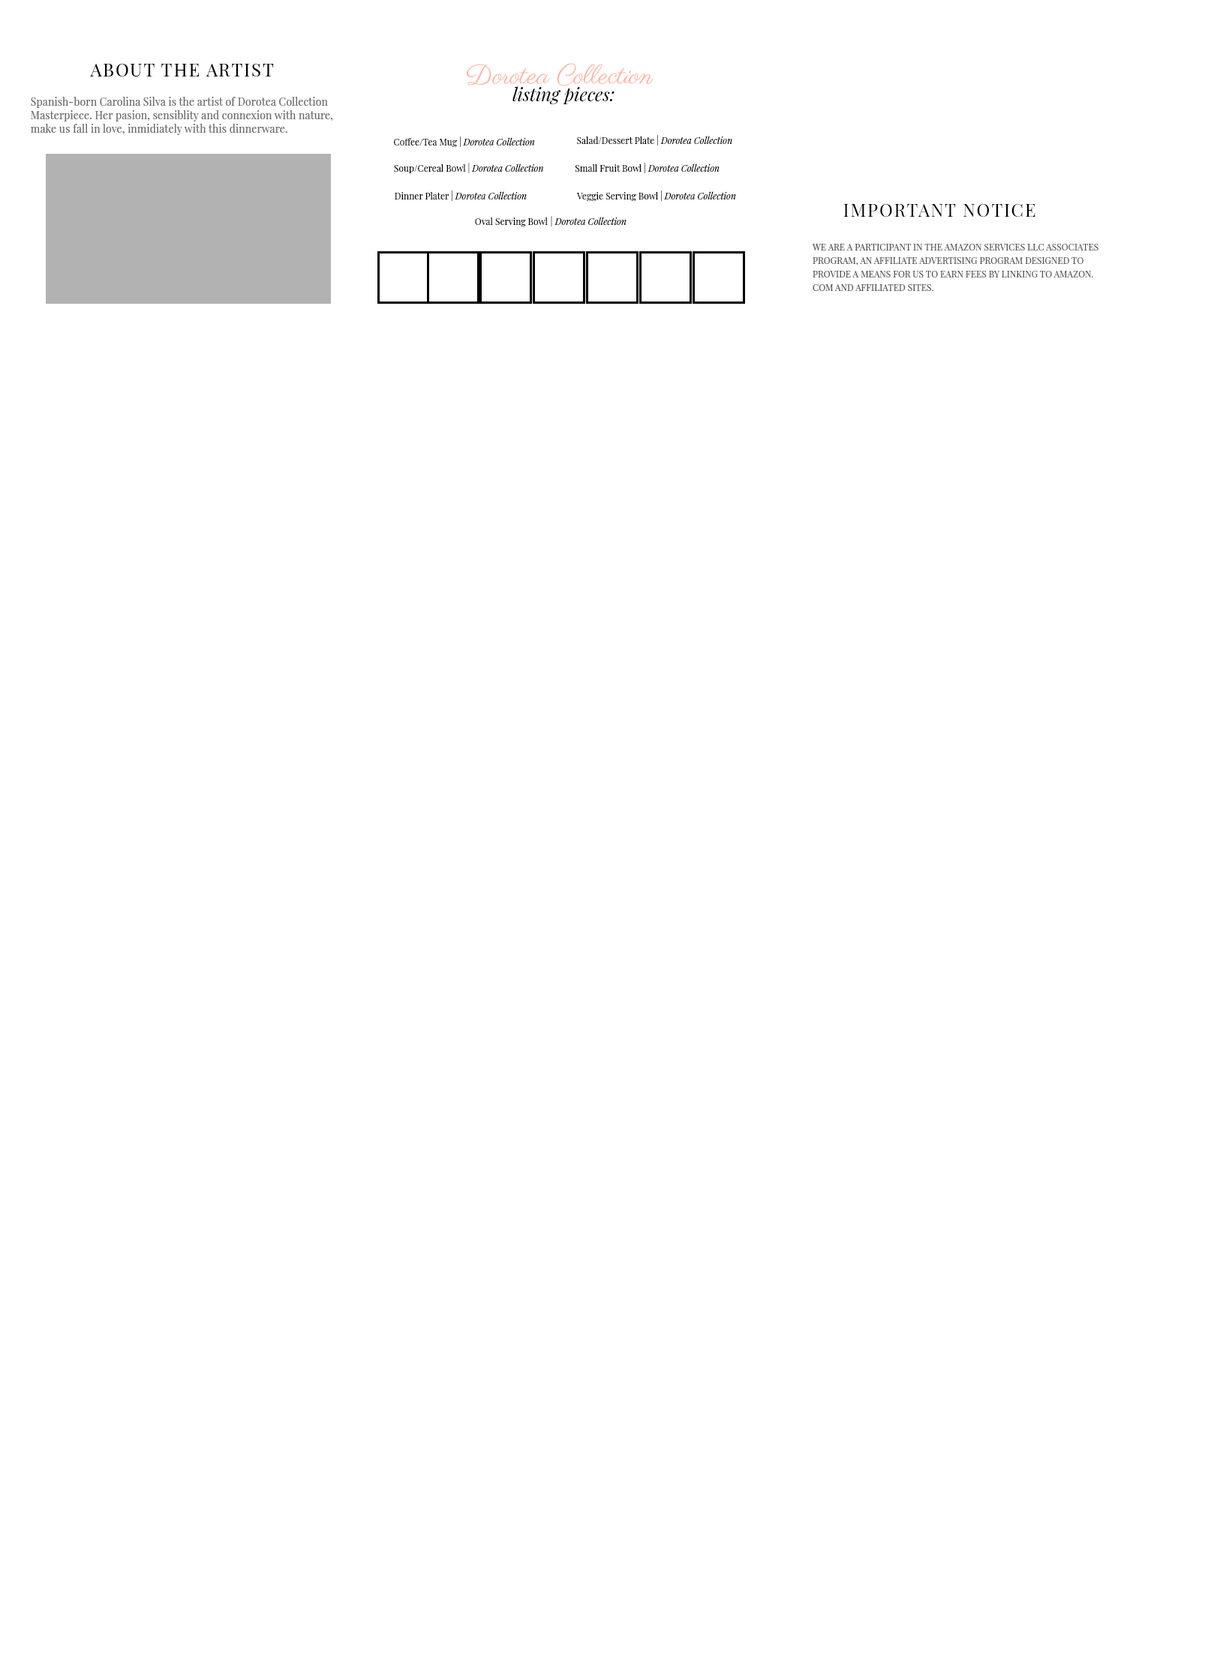
<style>
.page{position:relative;width:1208px;height:1656px;background:#ffffff}
.page>*{position:absolute;margin:0}
.t1{font:18px "PlayfairDisplay-Regular";letter-spacing:0.075em;color:#000000}
.t2{font:27px/18px "Parisienne-Regular";color:#ffb3a1}
.t3{font:18px/18px "PlayfairDisplay-Italic";color:#000000}
.t4{font:10.5px/13.5px "PlayfairDisplay-Regular";letter-spacing:0.01em;color:#6b6b6b}
.t5{font:9px "PlayfairDisplay-Italic";color:#000000}
.t6{font:9px "PlayfairDisplay-Regular";color:#000000}
.t7{font:9px/13.5px "PlayfairDisplay-Regular";color:#565656}
</style>
<div class="page">
<p class="t1" style="left:90px;top:64px;width:184px;height:12px">ABOUT THE ARTIST</p>
<p class="t2" style="left:466px;top:63px;width:187px;height:41px;text-align:center">Dorotea Collection <br><span class="t3">listing pieces:</span></p>
<p class="t4" style="left:31px;top:97px;width:302px;height:38px">Spanish-born Carolina Silva is the artist of Dorotea Collection<br>Masterpiece. Her pasion, sensiblity and connexion with nature, <br>make us fall in love, inmidiately with this dinnerware.</p>
<p class="t5" style="left:394px;top:136px;width:141px;height:11px"><span class="t6">Coffee/Tea Mug | </span>Dorotea Collection</p>
<p class="t6" style="left:577px;top:135px;width:155px;height:11px">Salad/Dessert Plate | <span class="t5">Dorotea Collection</span></p>
<p class="t6" style="left:394px;top:163px;width:149px;height:10px">Soup/Cereal Bowl | <span class="t5">Dorotea Collection</span></p>
<p class="t6" style="left:574px;top:163px;width:145px;height:10px">Small Fruit Bowl | <span class="t5">Dorotea Collection</span></p>
<p class="t5" style="left:394px;top:190px;width:132px;height:11px"><span class="t6">Dinner Plater | </span>Dorotea Collection</p>
<p class="t6" style="left:576px;top:190px;width:160px;height:11px">Veggie Serving Bowl | <span class="t5">Dorotea Collection</span></p>
<p class="t1" style="left:843px;top:204px;width:192px;height:13px">IMPORTANT NOTICE</p>
<p class="t5" style="left:475px;top:216px;width:151px;height:10px"><span class="t6">Oval Serving Bowl</span> | Dorotea Collection</p>
<p class="t7" style="left:812px;top:244px;width:286px;height:47px">WE ARE A PARTICIPANT IN THE AMAZON SERVICES LLC ASSOCIATES <br>PROGRAM, AN AFFILIATE ADVERTISING PROGRAM DESIGNED TO <br>PROVIDE A MEANS FOR US TO EARN FEES BY LINKING TO AMAZON.<br>COM AND AFFILIATED SITES.</p>
</div>
